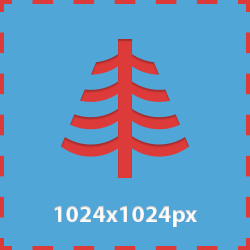
<style>
.page{position:relative;width:250px;height:250px;background:#50a6d6}
.page>*{position:absolute;margin:0}
.t1{font:24px "MyriadPro-Bold";color:#ffffff}
</style>
<div class="page">
<p class="t1" style="left:54px;top:206px;width:144px;height:21px">1024x1024px</p>
</div>
